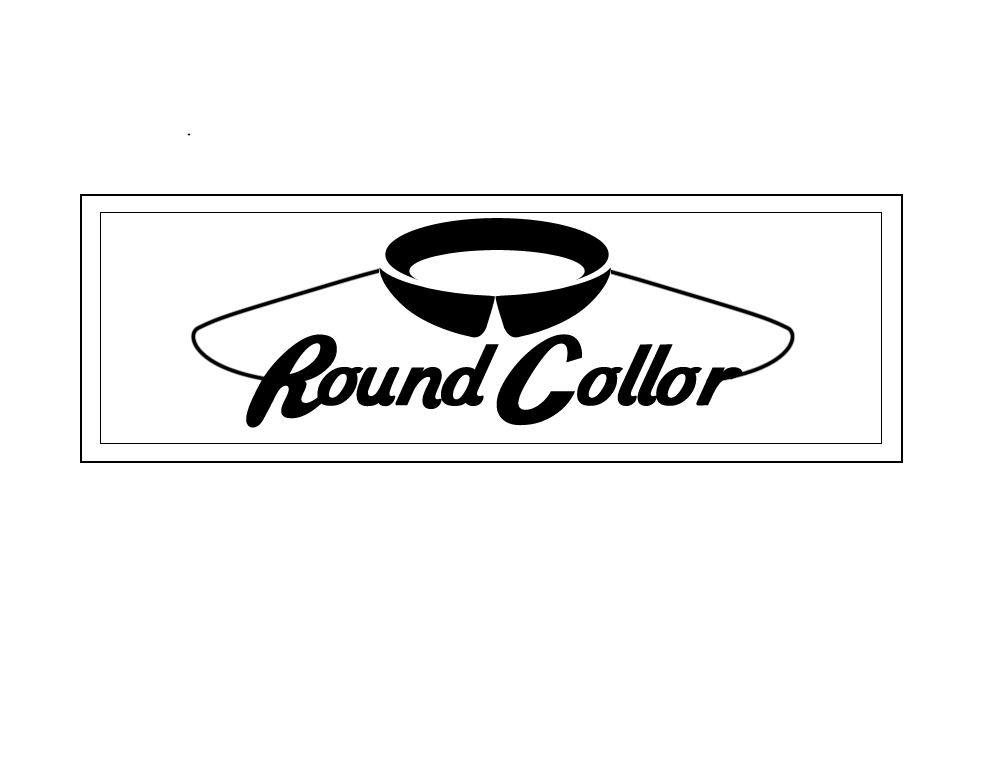
<style>
.page{position:relative;width:1000px;height:768px;background:#ffffff}
.page>*{position:absolute;margin:0}
.t1{font:147.4px "WildRide";color:#000000}
</style>
<div class="page">
<p class="t1" style="left:246px;top:334px;width:497px;height:94px">Round Collor</p>
</div>
